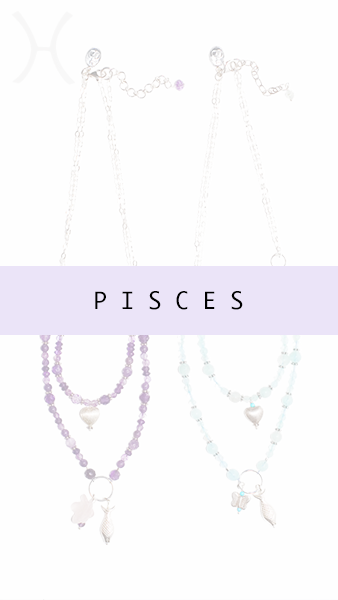
<style>
.page{position:relative;width:338px;height:600px;background:#fefefe}
.page>*{position:absolute;margin:0}
.t1{font:22.9px "Ayuthaya";color:#000000}
</style>
<div class="page">
<p class="t1" style="left:95px;top:291px;width:148px;height:19px">P I S C E S</p>
</div>
